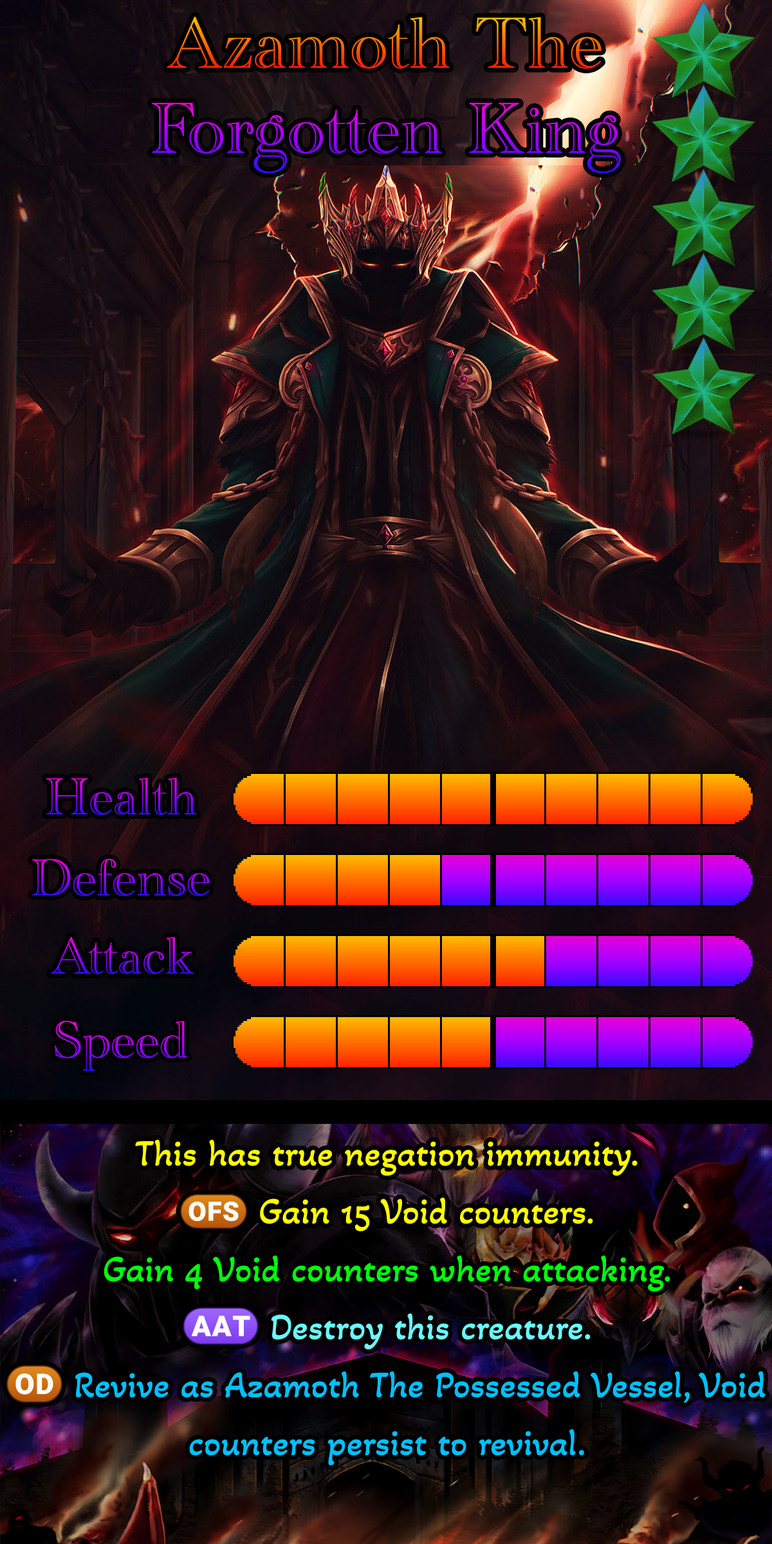
<style>
.page{position:relative;width:772px;height:1544px}
.page>*{position:absolute;margin:0}
.t1{font:128.7px "AcademyEngravedLetPlain"}
.t2{font:92.7px "AcademyEngravedLetPlain"}
.t3{font:64.3px/57.9px "AkayaTelivigala-Regular";color:#00c0ff}
.t4{font:64.3px/57.9px "AkayaTelivigala-Regular";color:#fffc00}
.t5{font:59.8px/57.9px "stoogedings-Regular";color:#fffc00}
.t6{font:64.3px/57.9px "AkayaTelivigala-Regular";color:#00ff0c}
.t7{font:64.3px/57.9px "stoogedings-Regular";color:#6bf8ff}
.t8{font:64.3px/57.9px "AkayaTelivigala-Regular";color:#6bf8ff}
.t9{font:64.3px/57.9px "stoogedings-Regular";letter-spacing:0.29em;color:#00c0ff}
</style>
<div class="page">
<p class="t1" style="left:167px;top:17px;width:435px;height:52px">Azamoth The</p>
<p class="t1" style="left:152px;top:102px;width:469px;height:72px">Forgotten King</p>
<p class="t2" style="left:46px;top:778px;width:150px;height:37px">Health</p>
<p class="t2" style="left:32px;top:858px;width:178px;height:38px">Defense</p>
<p class="t2" style="left:51px;top:937px;width:143px;height:38px">Attack</p>
<p class="t2" style="left:55px;top:1021px;width:133px;height:50px">Speed</p>
<p class="t3" style="left:6px;top:1140px;width:760px;height:326px;text-align:center"><span class="t4">This has true negation immunity.<br></span><span class="t5">(OFS)</span><span class="t4"> Gain 15 Void counters.<br></span><span class="t6">Gain 4 Void counters when attacking.<br></span><span class="t7">(AAT)</span><span class="t8"> Destroy this creature.<br></span><span class="t9">(OD)</span>Revive as Azamoth The Possessed Vessel, Void counters persist to revival.</p>
</div>
